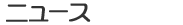
<style>
.page{position:relative;width:183px;height:25px;background:#ffffff}
.page>*{position:absolute;margin:0}
.t1{font:24px "DFMaruGothic-Bd-WING-RKSJ-H";color:#333333;font-weight:bold}
</style>
<div class="page">
<p class="t1" style="left:6px;top:3px;width:85px;height:19px">ニュース</p>
</div>
